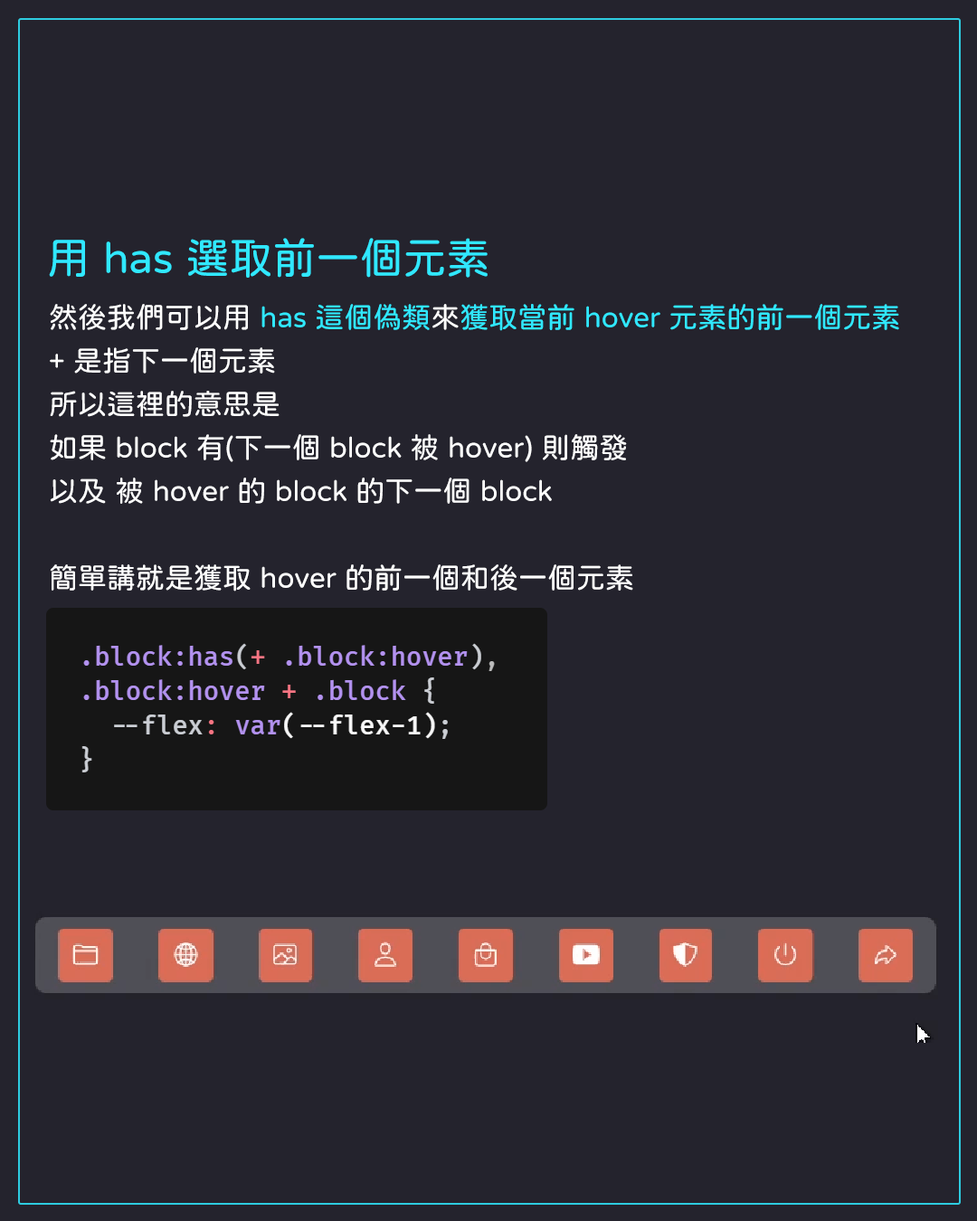
<style>
.page{position:relative;width:977px;height:1221px;background:#24232d}
.page>*{position:absolute;margin:0}
.t1{font:43.4px "jf-openhuninn-1.1";color:#30e8ff}
.t2{font:28.9px/43.4px "jf-openhuninn-1.1";color:#ffffff}
.t3{font:28.9px/43.4px "jf-openhuninn-1.1";color:#30e8ff}
</style>
<div class="page">
<p class="t1" style="left:49px;top:238px;width:438px;height:40px">用 has 選取前一個元素</p>
<p class="t2" style="left:50px;top:304px;width:849px;height:287px">然後我們可以用 <span class="t3">has 這個偽類</span>來<span class="t3">獲取當前 hover 元素的前一個元素<br></span>+ 是指下一個元素<br>所以這裡的意思是<br>如果 block 有(下一個 block 被 hover) 則觸發<br>以及 被 hover 的 block 的下一個 block<br><br>簡單講就是獲取 hover 的前一個和後一個元素</p>
</div>
